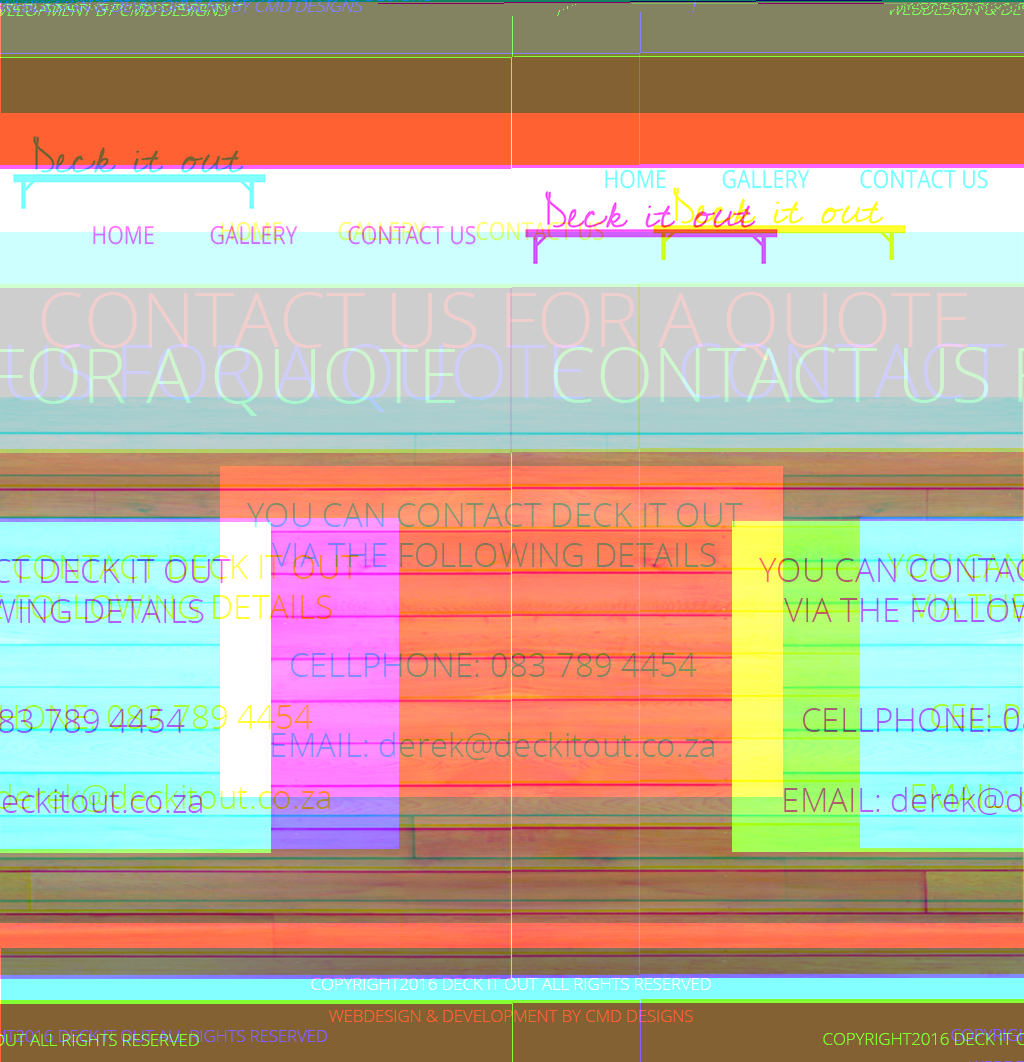
<style>
.page{position:relative;width:1024px;height:1062px}
.page>*{position:absolute;margin:0}
.t1{font:25px "OpenSans";scale:0.85 1}
.t2{font:75px "OpenSans-Light";color:#f1cece}
.t3{font:16.7px "OpenSans-Light";color:#f1cece}
.t4{font:33.3px "OpenSans-Light"}
</style>
<div class="page">
<p class="t1" style="left:605px;top:167px;width:61px;height:20px">HOME</p>
<p class="t1" style="left:722px;top:167px;width:88px;height:20px">GALLERY</p>
<p class="t1" style="left:860px;top:167px;width:128px;height:20px">CONTACT US</p>
<p class="t2" style="left:41px;top:290px;width:926px;height:68px"><span class="t3"><br></span>CONTACT US FOR A QUOTE</p>
<p class="t4" style="left:247px;top:501px;width:496px;height:64px;text-align:center">YOU CAN CONTACT DECK IT OUT <br>VIA THE FOLLOWING DETAILS</p>
<p class="t4" style="left:272px;top:651px;width:442px;height:107px;text-align:center">CELLPHONE: 083 789 4454<br><br>EMAIL: derek@deckitout.co.za</p>
</div>
